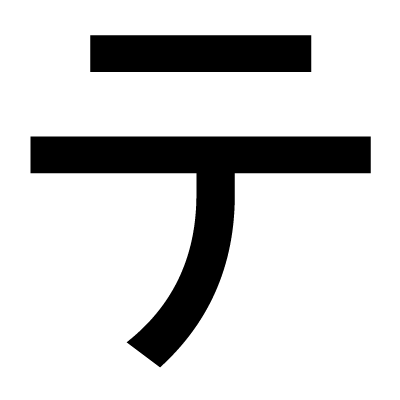
<style>
.page{position:relative;width:400px;height:400px;background:#ffffff}
.page>*{position:absolute;margin:0}
.t1{font:424.8px "MS-PGothic";color:#000000}
</style>
<div class="page">
<p class="t1" style="left:30px;top:35px;width:341px;height:333px">テ</p>
</div>
